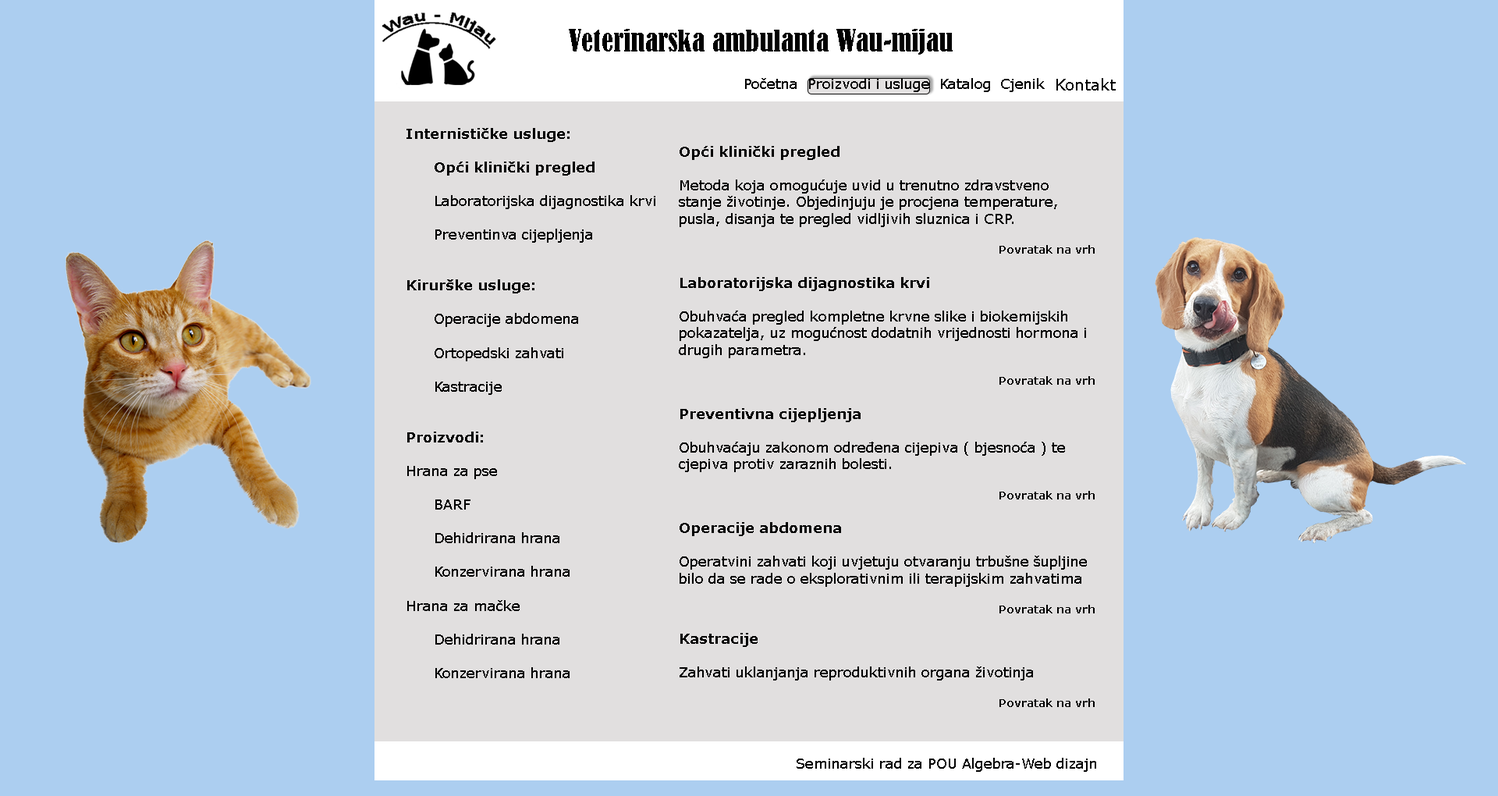
<style>
.page{position:relative;width:1498px;height:796px;background:#accef0}
.page>*{position:absolute;margin:0}
.t1{font:28.1px "BernardMT-Condensed";color:#000000}
.t2{font:14px "Verdana";color:#000000}
.t3{font:15.6px "Verdana";color:#000000}
.t4{font:14px "Verdana-Bold";color:#000000}
.t5{font:10.9px "Verdana-Bold";color:#000000}
</style>
<div class="page">
<p class="t1" style="left:569px;top:29px;width:384px;height:26px">Veterinarska ambulanta Wau-mijau</p>
<p class="t2" style="left:745px;top:78px;width:52px;height:11px">Početna</p>
<p class="t2" style="left:809px;top:78px;width:120px;height:14px">Proizvodi i usluge</p>
<p class="t2" style="left:941px;top:78px;width:49px;height:14px">Katalog</p>
<p class="t2" style="left:1001px;top:78px;width:44px;height:14px">Cjenik</p>
<p class="t3" style="left:1057px;top:78px;width:59px;height:13px">Kontakt</p>
<p class="t2" style="left:407px;top:128px;width:248px;height:550px"><span class="t4">Internističke usluge:<br> <br> Opći klinički pregled<br></span><br> Laboratorijska dijagnostika krvi<br><br> Preventinva cijepljenja<br><br><br><span class="t4">Kirurške usluge:<br></span><br> Operacije abdomena<br><br> Ortopedski zahvati<br><br> Kastracije<br><br><br><span class="t4">Proizvodi:<br></span><br>Hrana za pse<br><br> BARF<br><br> Dehidrirana hrana<br><br> Konzervirana hrana<br><br>Hrana za mačke<br><br> Dehidrirana hrana<br><br> Konzervirana hrana</p>
<p class="t2" style="left:679px;top:146px;width:416px;height:561px"><span class="t4">Opći klinički pregled<br></span><br>Metoda koja omogućuje uvid u trenutno zdravstveno stanje životinje. Objedinjuju je procjena temperature, pusla, disanja te pregled vidljivih sluznica i CRP.<br><br><span class="t5">Povratak na vrh<br><br></span><span class="t4">Laboratorijska dijagnostika krvi<br></span><br>Obuhvaća pregled kompletne krvne slike i biokemijskih pokazatelja, uz mogućnost dodatnih vrijednosti hormona i drugih parametra.<br><br><span class="t5">Povratak na vrh<br><br></span><span class="t4">Preventivna cijepljenja<br></span><br>Obuhvaćaju zakonom određena cijepiva ( bjesnoća ) te cjepiva protiv zaraznih bolesti.<br><br><span class="t5">Povratak na vrh<br><br></span><span class="t4">Operacije abdomena<br></span><br>Operatvini zahvati koji uvjetuju otvaranju trbušne šupljine bilo da se rade o eksplorativnim ili terapijskim zahvatima<br><br><span class="t5">Povratak na vrh<br><br></span><span class="t4">Kastracije<br></span><br>Zahvati uklanjanja reproduktivnih organa životinja<br><br><span class="t5">Povratak na vrh</span></p>
<p class="t2" style="left:797px;top:758px;width:299px;height:14px">Seminarski rad za POU Algebra-Web dizajn</p>
</div>
